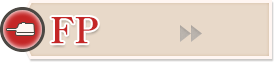
<style>
.page{position:relative;width:274px;height:66px;background:#e8d9c9}
.page>*{position:absolute;margin:0}
.t1{font:36px "RyuminPro-ExBold";color:#c42626}
</style>
<div class="page">
<p class="t1" style="left:51px;top:17px;width:47px;height:27px">FP</p>
</div>
